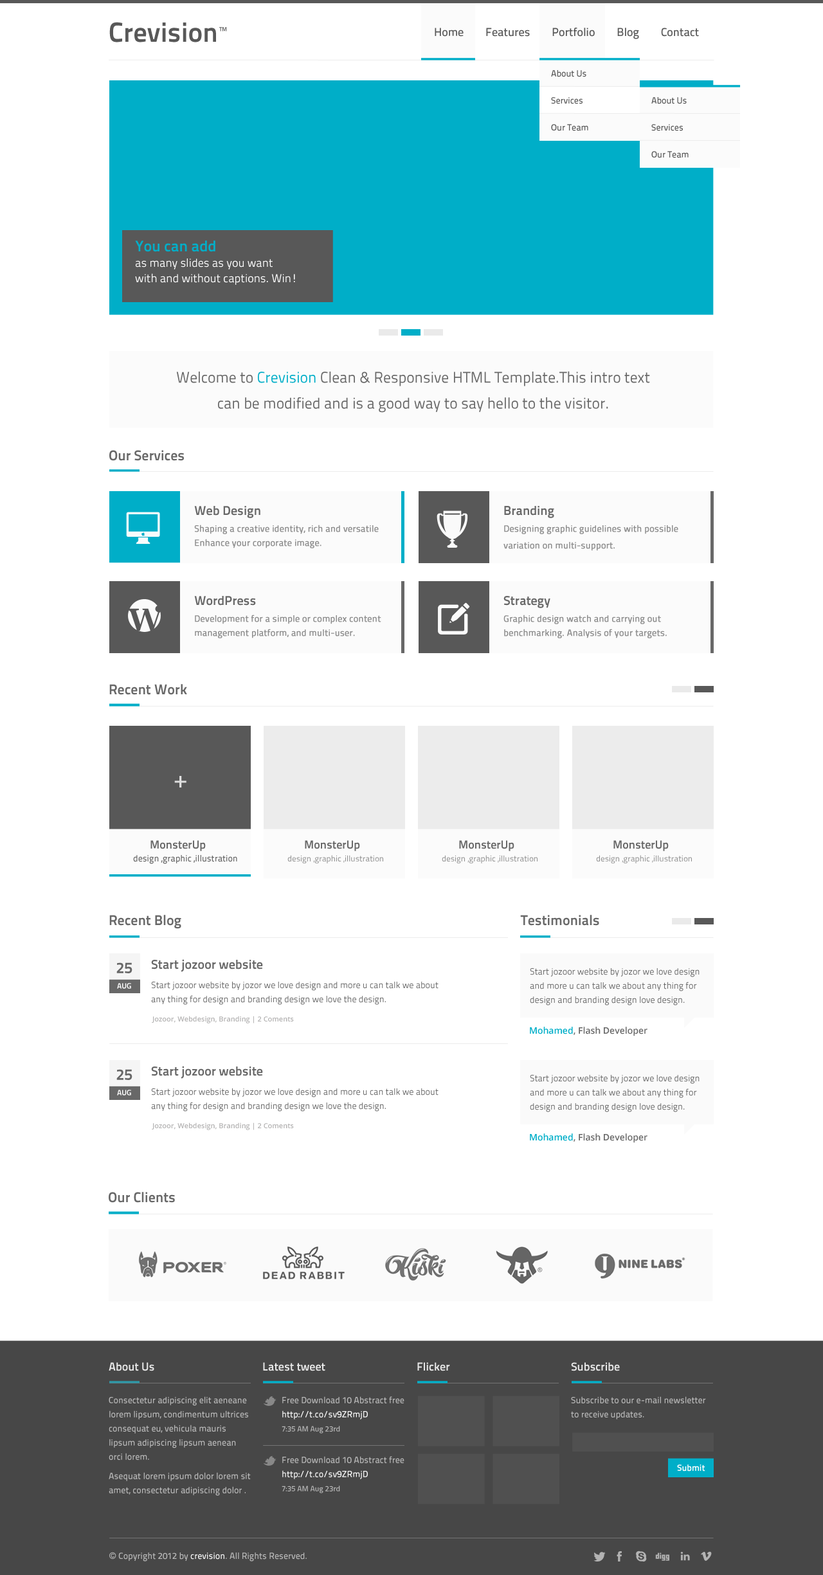
<style>
.page{position:relative;width:823px;height:1575px;background:#ffffff}
.page>*{position:absolute;margin:0}
.t1{font:11.6px "TitilliumText22L-Medium";color:#585858}
.t2{font:9px "TitilliumText22L-Medium";color:#585858}
.t3{font:11.6px/15.4px "TitilliumText22L-Regular";color:#ffffff}
.t4{font:15.4px/15.4px "TitilliumText22L-Bold";color:#00aec8}
.t5{font:15.4px/25.9px "TitilliumText22L-Regular";color:#686868}
.t6{font:15.4px/25.9px "TitilliumText22L-Regular";color:#00aec8}
.t7{font:14.1px "TitilliumText22L-Bold";color:#686868}
.t8{font:9px/16.7px "TitilliumText22L-Regular";color:#8d8d8d;font-weight:bold}
.t9{font:12.9px/27.6px "TitilliumText22L-Bold";color:#686868}
.t10{font:9px/14.1px "TitilliumText22L-Regular";color:#8d8d8d;font-weight:bold}
.t11{font:23.1px "TitilliumText22L-Medium";color:#dedede}
.t12{font:11.6px "TitilliumText22L-Bold";color:#686868}
.t13{font:9px "TitilliumText22L-Medium";color:#686868}
.t14{font:8.4px "TitilliumText22L-Regular";color:#8c8c8c}
.t15{font:12.9px "TitilliumText22L-Bold";color:#686868}
.t16{font:9px/14.1px "TitilliumText22L-Regular";color:#686868}
.t17{font:7.1px "OpenSans-Semibold";color:#b4b3b3}
.t18{font:9px "OpenSans-Semibold";color:#686868}
.t19{font:9px "OpenSans-Semibold";color:#00aec8}
.t20{font:11.6px "TitilliumText22L-Bold";color:#e8e8e8}
.t21{font:9px/14.1px "TitilliumText22L-Medium";color:#b9b9b9}
.t22{font:9px/14.1px "TitilliumText22L-Medium";color:#fafafa}
.t23{font:7.7px/14.1px "TitilliumText22L-Medium";color:#b9b9b9}
.t24{font:9px "TitilliumText22L-Bold";color:#ffffff}
.t25{font:9px "TitilliumText22L-Medium";color:#b9b9b9}
.t26{font:9px "ArialMT";color:#b9b9b9}
.t27{font:9px "TitilliumText22L-Medium";color:#fafafa}
</style>
<div class="page">
<p class="t1" style="left:435px;top:28px;width:264px;height:11px">Home        Features        Portfolio        Blog        Contact</p>
<p class="t2" style="left:551px;top:70px;width:35px;height:7px">About Us</p>
<p class="t2" style="left:551px;top:97px;width:31px;height:7px">Services</p>
<p class="t2" style="left:651px;top:97px;width:36px;height:7px">About Us</p>
<p class="t2" style="left:551px;top:124px;width:37px;height:7px">Our Team</p>
<p class="t2" style="left:651px;top:124px;width:32px;height:7px">Services</p>
<p class="t2" style="left:651px;top:151px;width:37px;height:7px">Our Team</p>
<p class="t3" style="left:135px;top:240px;width:160px;height:45px"><span class="t4">You can add<br></span>as many slides as you want<br>with and without captions. Win!</p>
<p class="t5" style="left:176px;top:371px;width:474px;height:42px;text-align:center">Welcome to <span class="t6">Crevision </span>Clean &amp; Responsive HTML Template.This intro text<br>can be modified and is a good way to say hello to the visitor.</p>
<p class="t7" style="left:109px;top:450px;width:75px;height:11px">Our Services</p>
<p class="t8" style="left:194px;top:506px;width:185px;height:42px"><span class="t9">Web Design<br></span>Shaping a creative identity, rich and versatile<br><span class="t10">Enhance your corporate image.</span></p>
<p class="t8" style="left:503px;top:506px;width:175px;height:45px"><span class="t9">Branding<br></span>Designing graphic guidelines with possible<br>variation on multi-support.</p>
<p class="t8" style="left:194px;top:596px;width:187px;height:42px"><span class="t9">WordPress<br></span>Development for a simple or complex content<br><span class="t10">management platform, and multi-user.</span></p>
<p class="t10" style="left:503px;top:596px;width:164px;height:42px"><span class="t9">Strategy<br></span><span class="t8">Graphic design watch and carrying out<br></span>benchmarking. Analysis of your targets.</p>
<p class="t7" style="left:109px;top:684px;width:78px;height:11px">Recent Work</p>
<p class="t11" style="left:174px;top:776px;width:12px;height:12px">+</p>
<p class="t12" style="left:150px;top:840px;width:56px;height:11px">MonsterUp</p>
<p class="t12" style="left:305px;top:840px;width:55px;height:11px">MonsterUp</p>
<p class="t12" style="left:459px;top:840px;width:55px;height:11px">MonsterUp</p>
<p class="t12" style="left:613px;top:840px;width:56px;height:11px">MonsterUp</p>
<p class="t13" style="left:133px;top:855px;width:104px;height:9px">design ,graphic ,illustration</p>
<p class="t14" style="left:287px;top:855px;width:96px;height:8px">design ,graphic ,illustration</p>
<p class="t14" style="left:442px;top:855px;width:95px;height:8px">design ,graphic ,illustration</p>
<p class="t14" style="left:596px;top:855px;width:96px;height:8px">design ,graphic ,illustration</p>
<p class="t7" style="left:109px;top:915px;width:72px;height:14px">Recent Blog</p>
<p class="t7" style="left:520px;top:915px;width:79px;height:11px">Testimonials</p>
<p class="t15" style="left:151px;top:959px;width:112px;height:13px">Start jozoor website</p>
<p class="t16" style="left:530px;top:968px;width:169px;height:37px">Start jozoor website by jozor we love design<br>and more u can talk we about any thing for<br>design and branding design love design.</p>
<p class="t16" style="left:151px;top:982px;width:287px;height:23px">Start jozoor website by jozor we love design and more u can talk we about<br>any thing for design and branding design we love the design.</p>
<p class="t17" style="left:152px;top:1016px;width:142px;height:7px">Jozoor, Webdesign, Branding | 2 Coments</p>
<p class="t18" style="left:530px;top:1027px;width:117px;height:9px"><span class="t19">Mohamed</span>, Flash Developer</p>
<p class="t15" style="left:151px;top:1066px;width:112px;height:13px">Start jozoor website</p>
<p class="t16" style="left:530px;top:1075px;width:169px;height:37px">Start jozoor website by jozor we love design<br>and more u can talk we about any thing for<br>design and branding design love design.</p>
<p class="t16" style="left:151px;top:1088px;width:287px;height:24px">Start jozoor website by jozor we love design and more u can talk we about<br>any thing for design and branding design we love the design.</p>
<p class="t17" style="left:152px;top:1122px;width:142px;height:8px">Jozoor, Webdesign, Branding | 2 Coments</p>
<p class="t18" style="left:530px;top:1133px;width:117px;height:10px"><span class="t19">Mohamed</span>, Flash Developer</p>
<p class="t7" style="left:109px;top:1192px;width:66px;height:11px">Our Clients</p>
<p class="t20" style="left:109px;top:1362px;width:45px;height:9px">About Us</p>
<p class="t20" style="left:263px;top:1362px;width:62px;height:9px">Latest tweet</p>
<p class="t20" style="left:417px;top:1362px;width:33px;height:9px">Flicker</p>
<p class="t20" style="left:571px;top:1362px;width:49px;height:9px">Subscribe</p>
<p class="t21" style="left:109px;top:1396px;width:142px;height:100px">Consectetur adipiscing elit aeneane lorem lipsum, condimentum ultrices consequat eu, vehicula mauris lipsum adipiscing lipsum aenean orci lorem.<br><br>Asequat lorem ipsum dolor lorem sit amet, consectetur adipiscing dolor .</p>
<p class="t21" style="left:282px;top:1396px;width:122px;height:38px">Free Download 10 Abstract free<br><span class="t22">http://t.co/sv9ZRmjD <br></span><span class="t23">7:35 AM Aug 23rd</span></p>
<p class="t21" style="left:571px;top:1396px;width:135px;height:23px">Subscribe to our e-mail newsletter to receive updates.</p>
<p class="t21" style="left:282px;top:1456px;width:122px;height:37px">Free Download 10 Abstract free<br><span class="t22">http://t.co/sv9ZRmjD <br></span><span class="t23">7:35 AM Aug 23rd</span></p>
<p class="t24" style="left:677px;top:1464px;width:28px;height:8px">Submit</p>
<p class="t25" style="left:109px;top:1552px;width:198px;height:10px"><span class="t26">© </span>Copyright 2012 by <span class="t27">crevision</span>. All Rights Reserved.</p>
</div>
